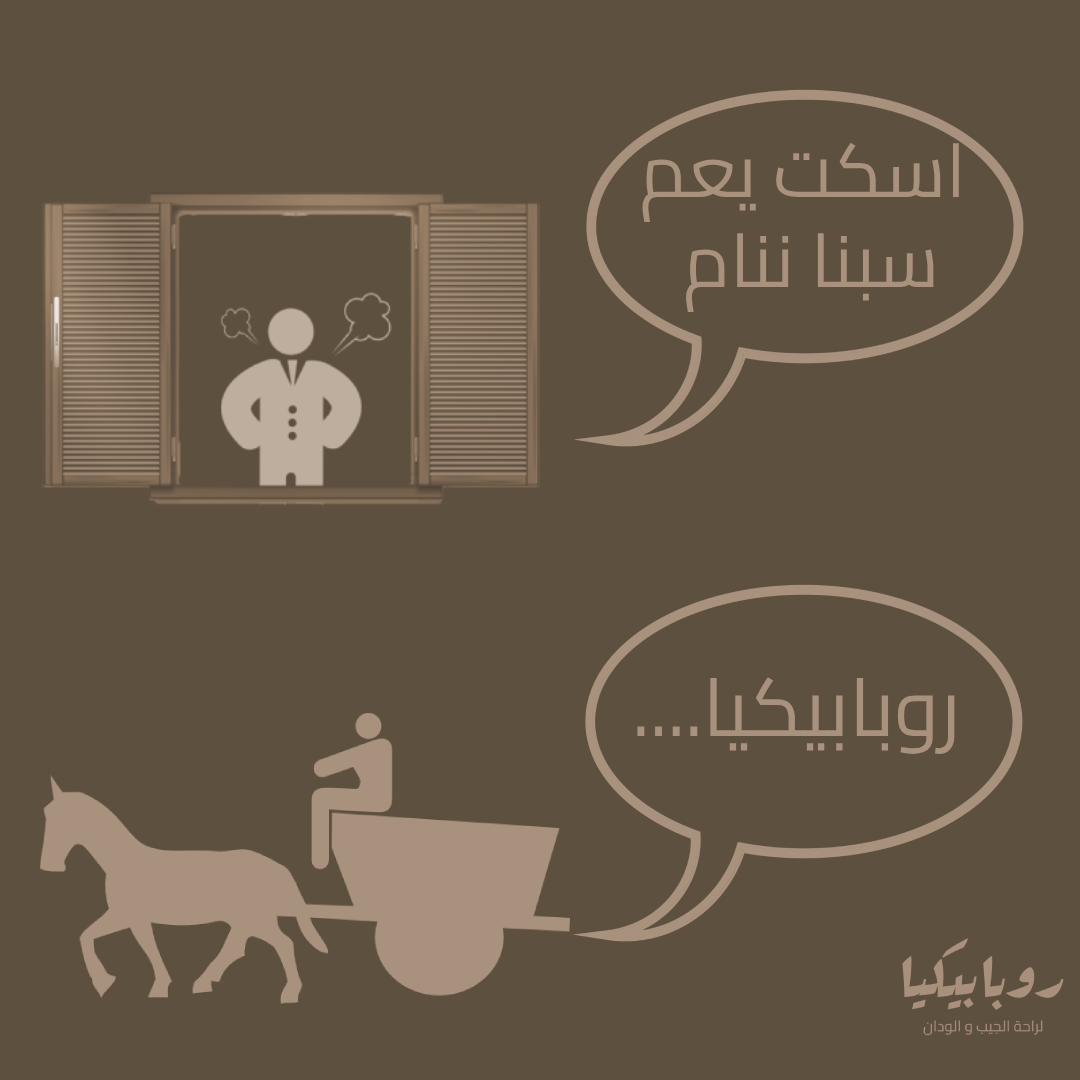
<style>
.page{position:relative;width:1080px;height:1080px;background:#5e503f}
.page>*{position:absolute;margin:0}
.t1{font:75px "Cairo-Regular";color:#a9927d}
.t2{font:81px "Cairo-Regular";color:#a9927d}
</style>
<div class="page">
<p class="t1" style="left:642px;top:142px;width:317px;height:170px;text-align:center">اسكت يعم <br>سبنا ننام</p>
<p class="t2" style="left:637px;top:677px;width:318px;height:77px">....روبابيكيا</p>
</div>
